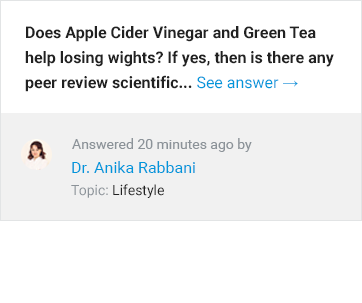
<style>
.page{position:relative;width:362px;height:303px;background:#ffffff}
.page>*{position:absolute;margin:0}
.t1{font:16px/25px "Roboto-Bold";color:#212121}
.t2{font:16px/25px "Roboto-Regular";color:#0097db}
.t3{font:16px/25px "TimesNewRomanPSMT";color:#0096db}
.t4{font:14px "Roboto-Regular";color:#8c9399}
.t5{font:16px "Roboto-Regular";color:#0097db}
.t6{font:14px "Roboto-Regular";color:#212121}
</style>
<div class="page">
<p class="t1" style="left:25px;top:26px;width:309px;height:66px">Does Apple Cider Vinegar and Green Tea help losing wights? If yes, then is there any peer review scientific... <span class="t2">See answer </span><span class="t3">→</span></p>
<p class="t4" style="left:72px;top:138px;width:180px;height:14px">Answered 20 minutes ago by</p>
<p class="t5" style="left:72px;top:161px;width:123px;height:12px">Dr. Anika Rabbani</p>
<p class="t6" style="left:71px;top:184px;width:93px;height:14px"><span class="t4">Topic: </span>Lifestyle</p>
</div>
